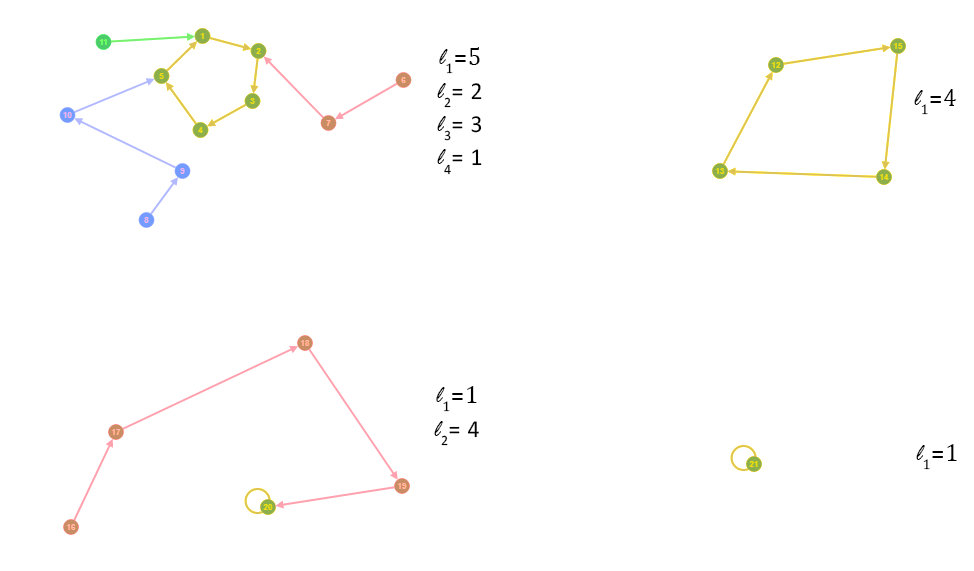
<style>
.page{position:relative;width:974px;height:571px;background:#ffffff}
.page>*{position:absolute;margin:0}
.t1{font:24.6px/33.4px "Calibri";letter-spacing:0.04em;color:#000000;scale:0.97 1}
.t2{font:24.6px/33.4px "RageItalic";letter-spacing:0.04em;color:#000000;scale:0.97 1}
.t3{font:24.6px/33.4px "Cambria";letter-spacing:0.04em;color:#000000;scale:0.97 1}
.t4{font:24.6px "Cambria";letter-spacing:0.04em;color:#000000;scale:0.97 1}
.t5{font:24.6px "RageItalic";letter-spacing:0.04em;color:#000000;scale:0.97 1}
</style>
<div class="page">
<p class="t1" style="left:437px;top:47px;width:45px;height:128px;text-align:center"><span class="t2">l</span><span class="t3">1=5<br></span><span class="t2">l</span>2= 2<br><span class="t2">l</span>3= 3<br><span class="t2">l</span>4= 1</p>
<p class="t4" style="left:914px;top:89px;width:42px;height:26px"><span class="t5">l</span>1=4</p>
<p class="t1" style="left:434px;top:386px;width:45px;height:60px;text-align:center"><span class="t2">l</span><span class="t3">1=1<br></span><span class="t2">l</span>2= 4</p>
<p class="t4" style="left:916px;top:444px;width:41px;height:26px"><span class="t5">l</span>1=1</p>
</div>
